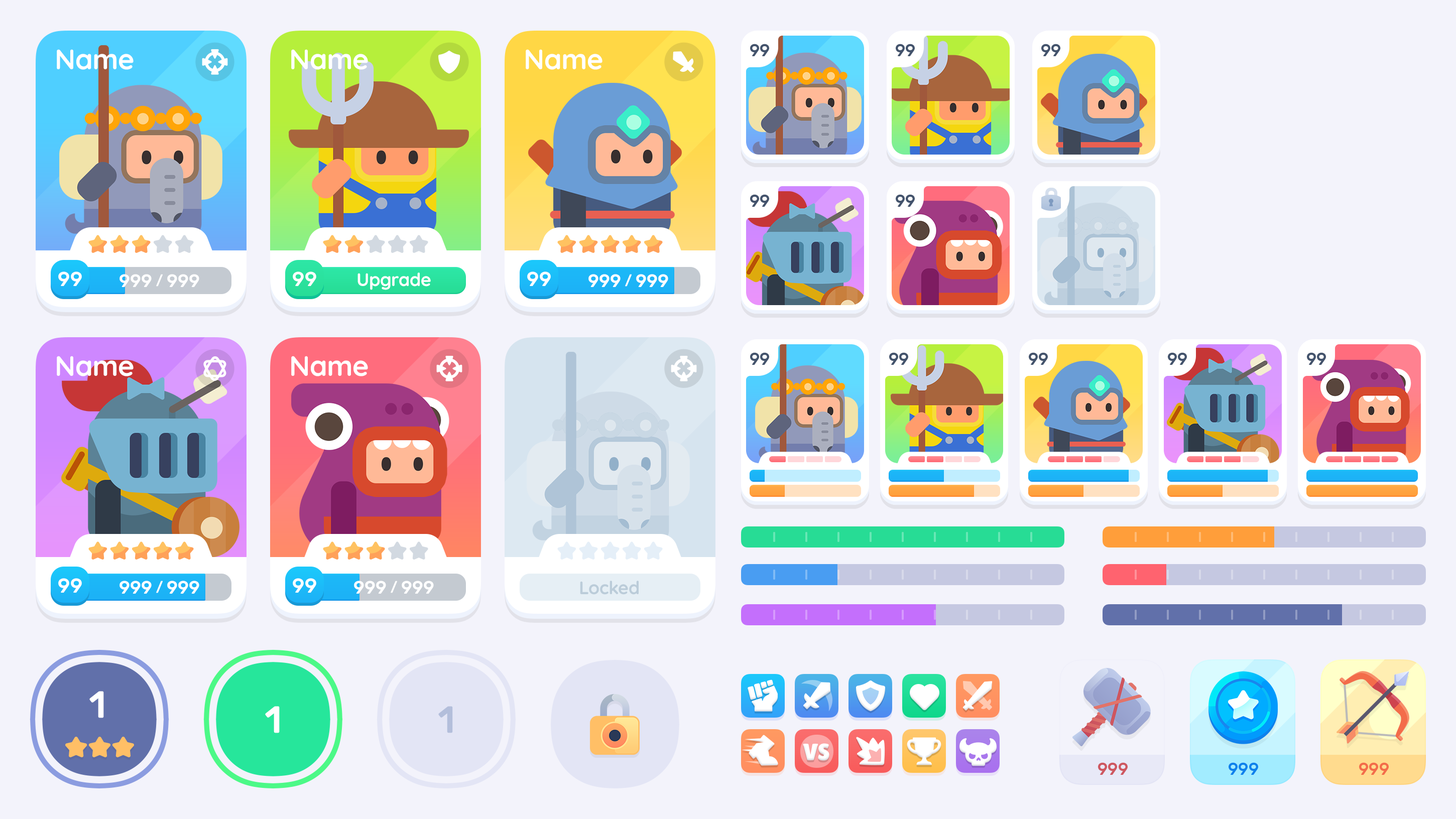
<style>
.page{position:relative;width:1456px;height:819px;background:#f3f3fb}
.page>*{position:absolute;margin:0}
.t1{font:28.1px "Quicksand-Bold";letter-spacing:-0.01em;color:#ffffff}
.t2{font:17.1px "Rubik-Medium";letter-spacing:-0.01em;color:#43536c}
.t3{font:20.1px "Rubik-Medium";letter-spacing:-0.01em;color:#ffffff}
.t4{font:18.1px "Rubik-Medium";letter-spacing:-0.01em;color:#ffffff;text-transform:uppercase}
.t5{font:13.6px "Rubik-Medium";letter-spacing:-0.01em;color:#ffffff;text-transform:uppercase}
.t6{font:18.1px "Quicksand-Bold";letter-spacing:-0.01em;color:#ffffff}
.t7{font:18.1px "Quicksand-Bold";letter-spacing:-0.01em;color:#bbccd9}
.t8{font:37.6px "Rubik-Medium";color:#ffffff}
.t9{font:37.6px "Rubik-Medium";color:#b3bedb}
.t10{font:17.1px "Rubik-Medium";letter-spacing:-0.01em;color:#ce5760}
.t11{font:17.1px "Rubik-Medium";letter-spacing:-0.01em;color:#0e81ec}
.t12{font:17.1px "Rubik-Medium";letter-spacing:-0.01em;color:#f36c4a}
</style>
<div class="page">
<p class="t1" style="left:57px;top:49px;width:77px;height:21px">Name</p>
<p class="t1" style="left:291px;top:49px;width:77px;height:21px">Name</p>
<p class="t1" style="left:526px;top:49px;width:76px;height:21px">Name</p>
<p class="t2" style="left:750px;top:44px;width:19px;height:12px">99</p>
<p class="t2" style="left:895px;top:44px;width:20px;height:12px">99</p>
<p class="t2" style="left:1041px;top:44px;width:19px;height:12px">99</p>
<p class="t2" style="left:750px;top:194px;width:19px;height:13px">99</p>
<p class="t2" style="left:895px;top:194px;width:20px;height:13px">99</p>
<p class="t3" style="left:58px;top:272px;width:24px;height:14px">99</p>
<p class="t4" style="left:119px;top:274px;width:80px;height:13px">999 <span class="t5">/</span> 999</p>
<p class="t3" style="left:293px;top:272px;width:23px;height:14px">99</p>
<p class="t6" style="left:357px;top:273px;width:74px;height:17px">Upgrade</p>
<p class="t3" style="left:527px;top:272px;width:24px;height:14px">99</p>
<p class="t4" style="left:588px;top:274px;width:80px;height:13px">999 <span class="t5">/</span> 999</p>
<p class="t2" style="left:750px;top:352px;width:19px;height:13px">99</p>
<p class="t2" style="left:889px;top:352px;width:19px;height:13px">99</p>
<p class="t2" style="left:1028px;top:352px;width:20px;height:13px">99</p>
<p class="t2" style="left:1168px;top:352px;width:19px;height:13px">99</p>
<p class="t2" style="left:1307px;top:352px;width:19px;height:13px">99</p>
<p class="t1" style="left:57px;top:356px;width:77px;height:20px">Name</p>
<p class="t1" style="left:291px;top:356px;width:77px;height:20px">Name</p>
<p class="t3" style="left:58px;top:578px;width:24px;height:15px">99</p>
<p class="t4" style="left:119px;top:581px;width:80px;height:13px">999 <span class="t5">/</span> 999</p>
<p class="t3" style="left:293px;top:578px;width:23px;height:15px">99</p>
<p class="t4" style="left:354px;top:581px;width:80px;height:13px">999 <span class="t5">/</span> 999</p>
<p class="t7" style="left:580px;top:581px;width:58px;height:14px">Locked</p>
<p class="t8" style="left:89px;top:691px;width:15px;height:27px">1</p>
<p class="t8" style="left:265px;top:706px;width:15px;height:27px">1</p>
<p class="t9" style="left:438px;top:706px;width:15px;height:27px">1</p>
<p class="t10" style="left:1098px;top:762px;width:29px;height:13px">999</p>
<p class="t11" style="left:1228px;top:762px;width:30px;height:13px">999</p>
<p class="t12" style="left:1359px;top:762px;width:29px;height:13px">999</p>
</div>
